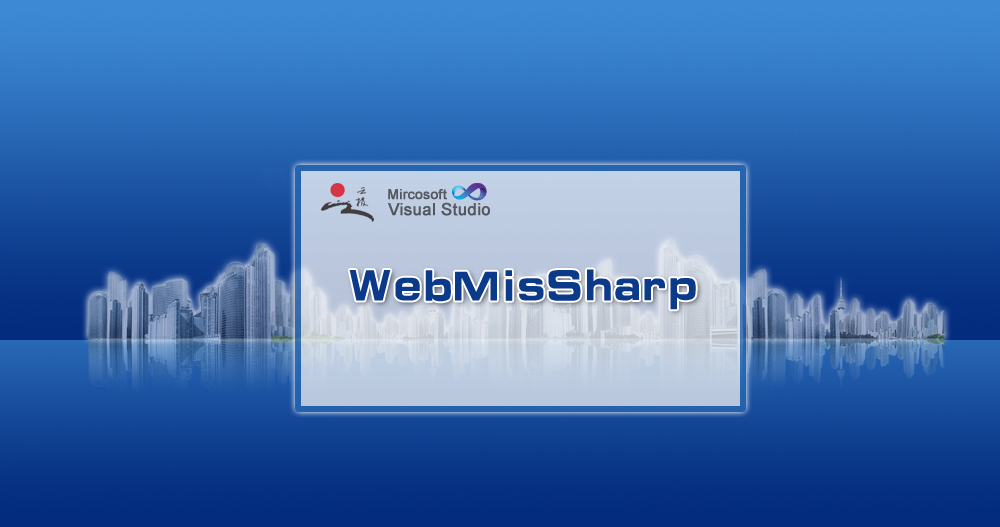
<style>
.page{position:relative;width:1000px;height:527px}
.page>*{position:absolute;margin:0}
.t1{font:13.9px "ArialMT";color:#55595f;font-weight:bold}
.t2{font:16.7px "ArialMT";color:#54585e;font-weight:bold}
.t3{font:45.8px "ç»å¸ç»¼èºä½ç®-regular";color:#0c3a8b}
</style>
<div class="page">
<p class="t1" style="left:388px;top:189px;width:59px;height:11px">Mircosoft</p>
<p class="t2" style="left:388px;top:202px;width:102px;height:14px">Visual Studio</p>
<p class="t3" style="left:349px;top:269px;width:347px;height:41px">WebMisSharp</p>
</div>
